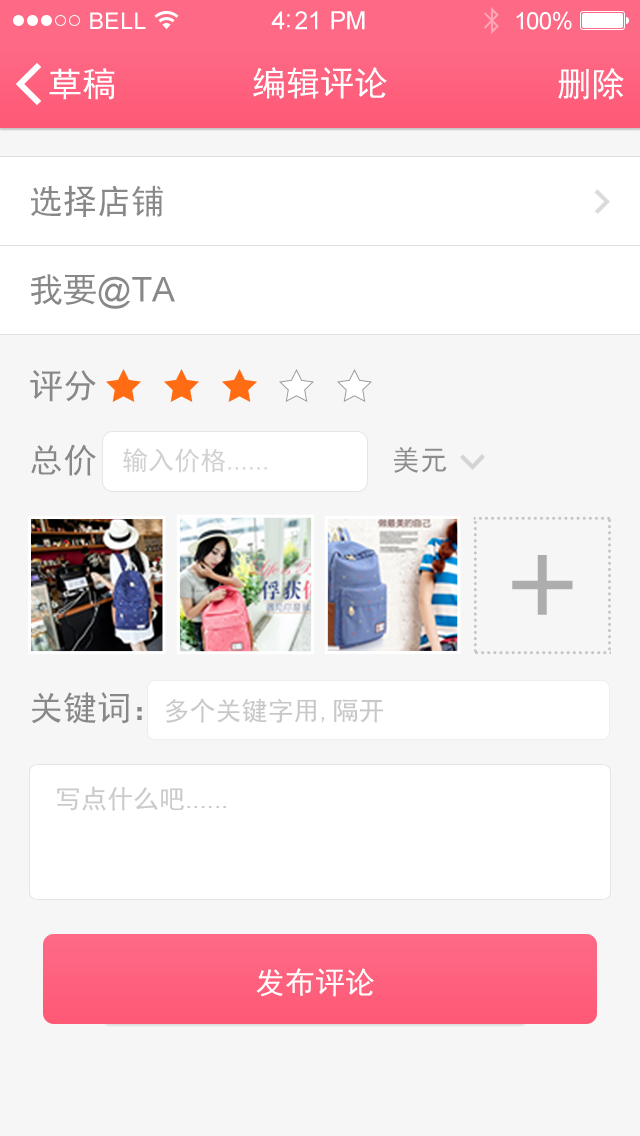
<style>
.page{position:relative;width:640px;height:1136px;background:#f6f6f6}
.page>*{position:absolute;margin:0}
.t1{font:34px "SimHei";color:#888888}
.t2{font:34px "ArialMT";color:#888888}
.t3{font:26px "ArialMT";color:#d1d1d1}
.t4{font:26px "SimHei";color:#d1d1d1}
.t5{font:28px "SimHei";color:#8c8c8c}
.t6{font:133.7px "SimHei";color:#adadad}
.t7{font:18px "SimHei";color:#7f93c4}
.t8{font:26px "SimHei";color:#c8c8c8}
.t9{font:26px "ArialMT";color:#cbcbcb}
.t10{font:26px "SimHei";color:#cbcbcb}
.t11{font:30px "SimHei";color:#ffffff}
</style>
<div class="page">
<p class="t1" style="left:31px;top:185px;width:132px;height:32px">选择店铺</p>
<p class="t2" style="left:31px;top:274px;width:144px;height:35px"><span class="t1">我要</span>@TA</p>
<p class="t1" style="left:30px;top:370px;width:66px;height:32px">评分</p>
<p class="t1" style="left:31px;top:444px;width:65px;height:32px">总价</p>
<p class="t3" style="left:123px;top:448px;width:144px;height:25px"><span class="t4">输入价格</span>......</p>
<p class="t5" style="left:394px;top:446px;width:53px;height:27px">美元</p>
<p class="t6" style="left:512px;top:555px;width:61px;height:60px">+</p>
<p class="t7" style="left:360px;top:622px;width:9px;height:9px">+</p>
<p class="t1" style="left:31px;top:692px;width:111px;height:32px">关键词：</p>
<p class="t8" style="left:166px;top:698px;width:218px;height:25px">多个关键字用,隔开</p>
<p class="t9" style="left:57px;top:786px;width:169px;height:25px"><span class="t10">写点什么吧</span>......</p>
<p class="t11" style="left:256px;top:968px;width:118px;height:29px">发布评论</p>
</div>
